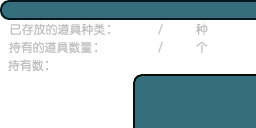
<style>
.page{position:relative;width:256px;height:128px;background:#ffffff}
.page>*{position:absolute;margin:0}
.t1{font:12px "FZY3--GB1-4";letter-spacing:0.025em;color:#bfbfbf;scale:0.97 1}
</style>
<div class="page">
<p class="t1" style="left:10px;top:23px;width:95px;height:13px">已存放的道具种类</p>
<p class="t1" style="left:196px;top:23px;width:12px;height:13px">种</p>
<p class="t1" style="left:9px;top:41px;width:83px;height:13px">持有的道具数量</p>
<p class="t1" style="left:196px;top:42px;width:12px;height:11px">个</p>
<p class="t1" style="left:8px;top:59px;width:36px;height:13px">持有数</p>
</div>
